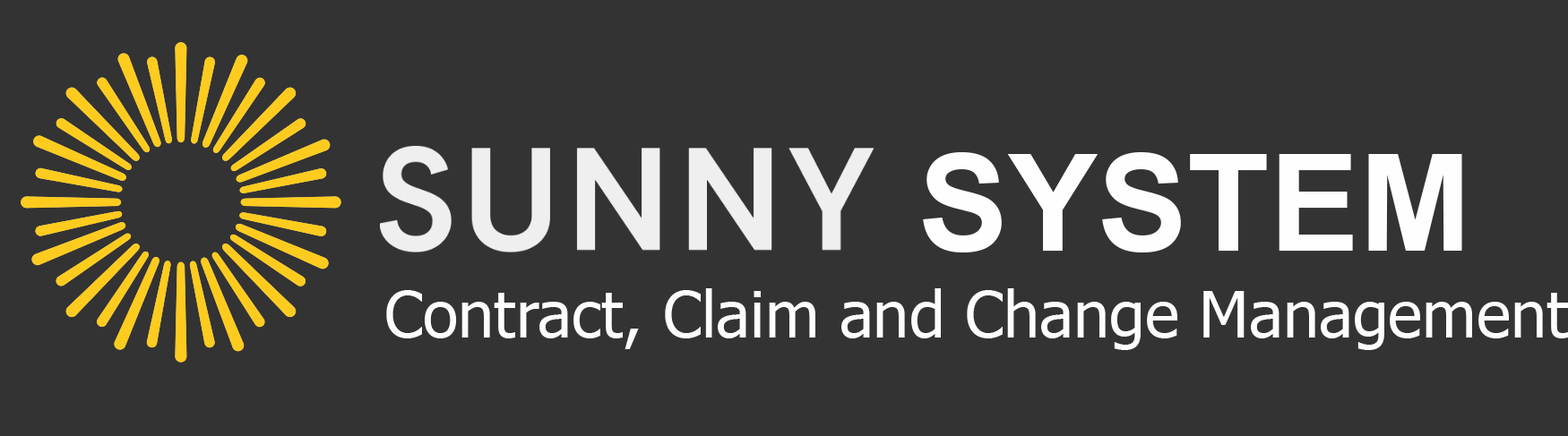
<style>
.page{position:relative;width:1568px;height:436px;background:#333333}
.page>*{position:absolute;margin:0}
.t1{font:134.4px "Arial-BoldMT";color:#fefefe}
.t2{font:64.5px "Tahoma";color:#fefefe}
</style>
<div class="page">
<p class="t1" style="left:923px;top:152px;width:539px;height:101px">SYSTEM</p>
<p class="t2" style="left:386px;top:289px;width:1182px;height:61px">Contract, Claim and Change Management</p>
</div>
